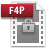
<style>
.page{position:relative;width:48px;height:48px;background:#ffffff}
.page>*{position:absolute;margin:0}
.t1{font:11px "MyriadPro-BoldCond";letter-spacing:0.005em;color:#ffffff;text-transform:uppercase;scale:1.1 1}
</style>
<div class="page">
<p class="t1" style="left:14px;top:6px;width:11px;height:8px">4P</p>
</div>
